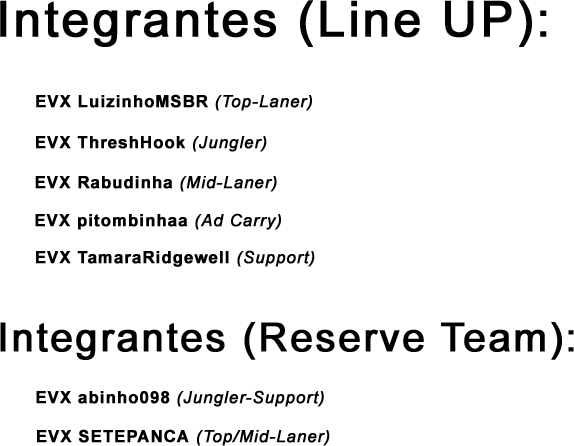
<style>
.page{position:relative;width:574px;height:446px;background:#ffffff}
.page>*{position:absolute;margin:0}
.t1{font:48.9px "ArialMT";letter-spacing:0.05em;color:#000000;font-weight:bold}
.t2{font:16.4px "Arial-BoldMT";letter-spacing:0.05em;color:#000000;font-weight:bold}
.t3{font:16.4px "Arial-ItalicMT";letter-spacing:0.05em;color:#000000;font-weight:bold}
.t4{font:39.7px "ArialMT";letter-spacing:0.05em;color:#000000;font-weight:bold}
</style>
<div class="page">
<p class="t1" style="left:0px;top:0px;width:547px;height:47px">Integrantes (Line UP):</p>
<p class="t2" style="left:36px;top:94px;width:276px;height:17px">EVX LuizinhoMSBR <span class="t3">(Top-Laner)</span></p>
<p class="t2" style="left:36px;top:136px;width:231px;height:16px">EVX ThreshHook <span class="t3">(Jungler)</span></p>
<p class="t2" style="left:35px;top:176px;width:242px;height:16px">EVX Rabudinha <span class="t3">(Mid-Laner)</span></p>
<p class="t2" style="left:35px;top:213px;width:246px;height:17px">EVX pitombinhaa <span class="t3">(Ad Carry)</span></p>
<p class="t2" style="left:36px;top:250px;width:279px;height:17px">EVX TamaraRidgewell <span class="t3">(Support)</span></p>
<p class="t4" style="left:0px;top:322px;width:574px;height:38px">Integrantes (Reserve Team):</p>
<p class="t3" style="left:36px;top:390px;width:288px;height:17px"><span class="t2">EVX abinho098 </span>(Jungler-Support)</p>
<p class="t3" style="left:37px;top:429px;width:293px;height:17px"><span class="t2">EVX SETEPANCA </span>(Top/Mid-Laner)</p>
</div>
